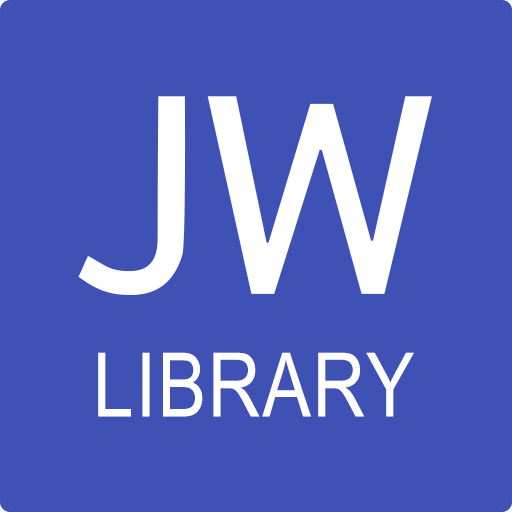
<style>
.page{position:relative;width:512px;height:512px;background:#3f51b5}
.page>*{position:absolute;margin:0}
.t1{font:89px "ArialNarrow";letter-spacing:0.02em;color:#ffffff}
</style>
<div class="page">
<p class="t1" style="left:98px;top:352px;width:316px;height:65px">LIBRARY</p>
</div>
